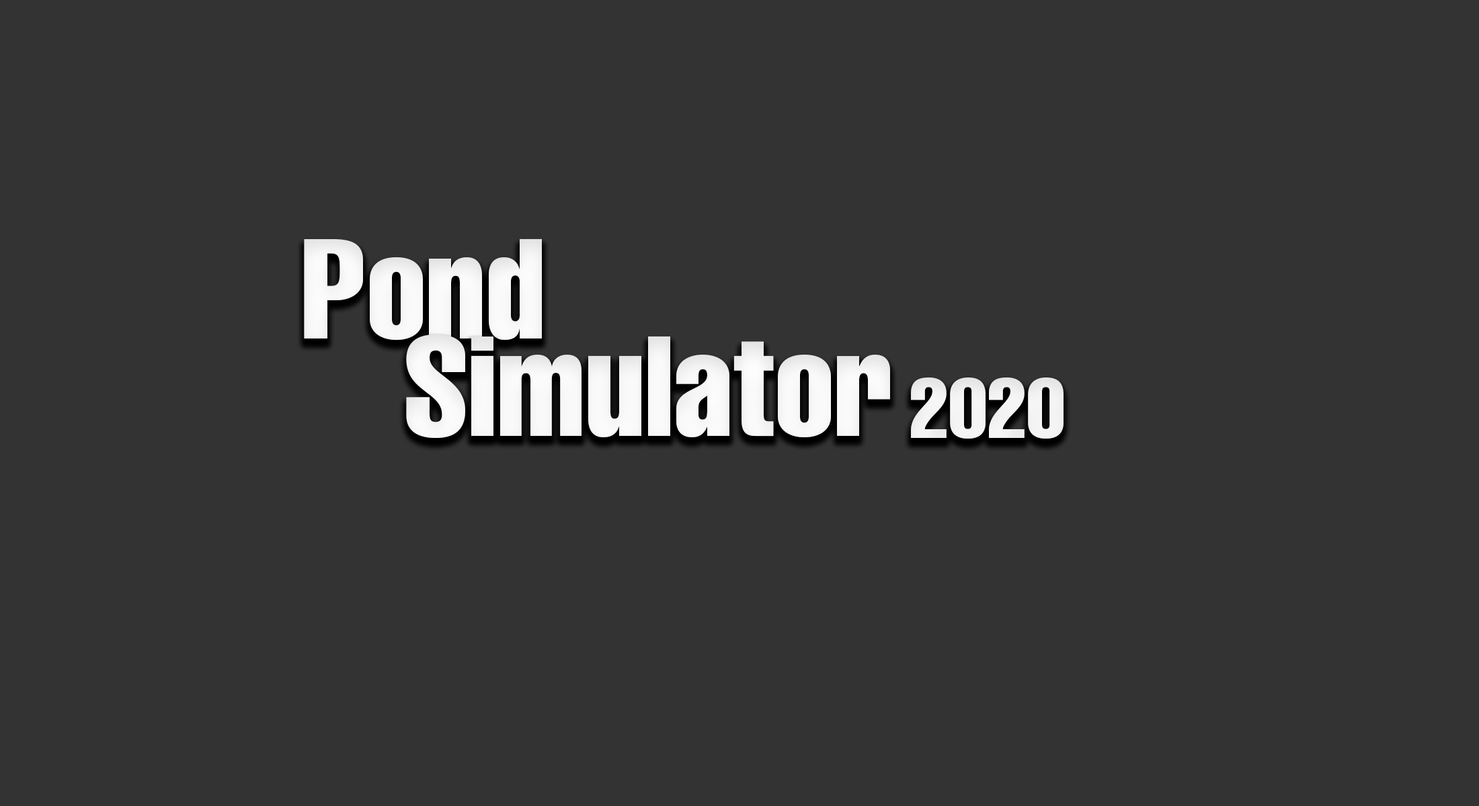
<style>
.page{position:relative;width:1479px;height:806px;background:#333333}
.page>*{position:absolute;margin:0}
.t1{font:140px "Helvetica-Compressed";color:#ffffff}
.t2{font:84px "Helvetica-Compressed";color:#ffffff}
</style>
<div class="page">
<p class="t1" style="left:304px;top:239px;width:238px;height:102px">Pond</p>
<p class="t1" style="left:406px;top:335px;width:484px;height:103px">Simulator</p>
<p class="t2" style="left:911px;top:378px;width:152px;height:61px">2020</p>
</div>
